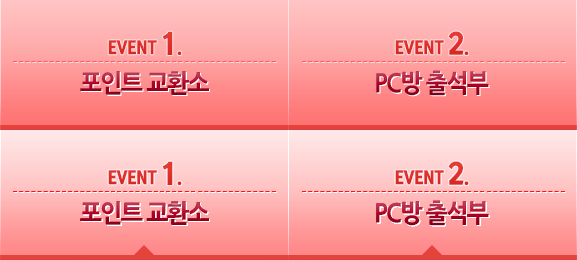
<style>
.page{position:relative;width:577px;height:260px}
.page>*{position:absolute;margin:0}
.t1{font:18px "RixGoBK";letter-spacing:-0.025em;color:#df312a;scale:0.95 1}
.t2{font:30px "RixGoBK";letter-spacing:-0.025em;color:#df312a;scale:0.95 1}
.t3{font:25px "NanumGothicExtraBold";letter-spacing:-0.075em;scale:0.95 1}
</style>
<div class="page">
<p class="t1" style="left:108px;top:31px;width:74px;height:24px">EVENT <span class="t2">1</span>.</p>
<p class="t1" style="left:395px;top:31px;width:74px;height:24px">EVENT <span class="t2">2</span>.</p>
<p class="t3" style="left:80px;top:71px;width:129px;height:24px">포인트 교환소</p>
<p class="t3" style="left:376px;top:70px;width:113px;height:26px">PC방 출석부</p>
<p class="t1" style="left:108px;top:161px;width:74px;height:24px">EVENT <span class="t2">1</span>.</p>
<p class="t1" style="left:108px;top:161px;width:74px;height:24px">EVENT <span class="t2">1</span>.</p>
<p class="t1" style="left:395px;top:161px;width:74px;height:24px">EVENT <span class="t2">2</span>.</p>
<p class="t1" style="left:395px;top:161px;width:74px;height:24px">EVENT <span class="t2">2</span>.</p>
<p class="t3" style="left:80px;top:201px;width:129px;height:24px">포인트 교환소</p>
<p class="t3" style="left:80px;top:201px;width:129px;height:24px">포인트 교환소</p>
<p class="t3" style="left:376px;top:200px;width:113px;height:26px">PC방 출석부</p>
<p class="t3" style="left:376px;top:200px;width:113px;height:26px">PC방 출석부</p>
</div>
